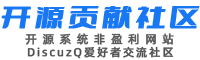
<style>
.page{position:relative;width:200px;height:60px;background:#ffffff}
.page>*{position:absolute;margin:0}
.t1{font:22.8px "DOUYU-Font";letter-spacing:0.15em;color:#1878f3;font-weight:bold}
.t2{font:11.7px "AlibabaPuHuiTi-Regular";letter-spacing:0.45em;color:#5a5a5a;font-weight:bold}
.t3{font:11.2px "AlibabaPuHuiTi-Regular";letter-spacing:0.15em;color:#525252;font-weight:bold}
</style>
<div class="page">
<p class="t1" style="left:1px;top:6px;width:199px;height:23px">开源贡献社区</p>
<p class="t2" style="left:25px;top:33px;width:149px;height:12px">开源系统非盈利网站</p>
<p class="t3" style="left:27px;top:46px;width:147px;height:13px">DiscuzQ爱好者交流社区</p>
</div>
